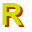
<style>
.page{position:relative;width:32px;height:32px;background:#ffffff}
.page>*{position:absolute;margin:0}
.t1{font:30.6px "Arial-BoldMT";color:#d2de00}
.t2{font:30.6px "Arial-BoldMT"}
</style>
<div class="page">
<p class="t1" style="left:2px;top:3px;width:20px;height:22px">R</p>
<p class="t2" style="left:4px;top:5px;width:21px;height:22px">R</p>
</div>
